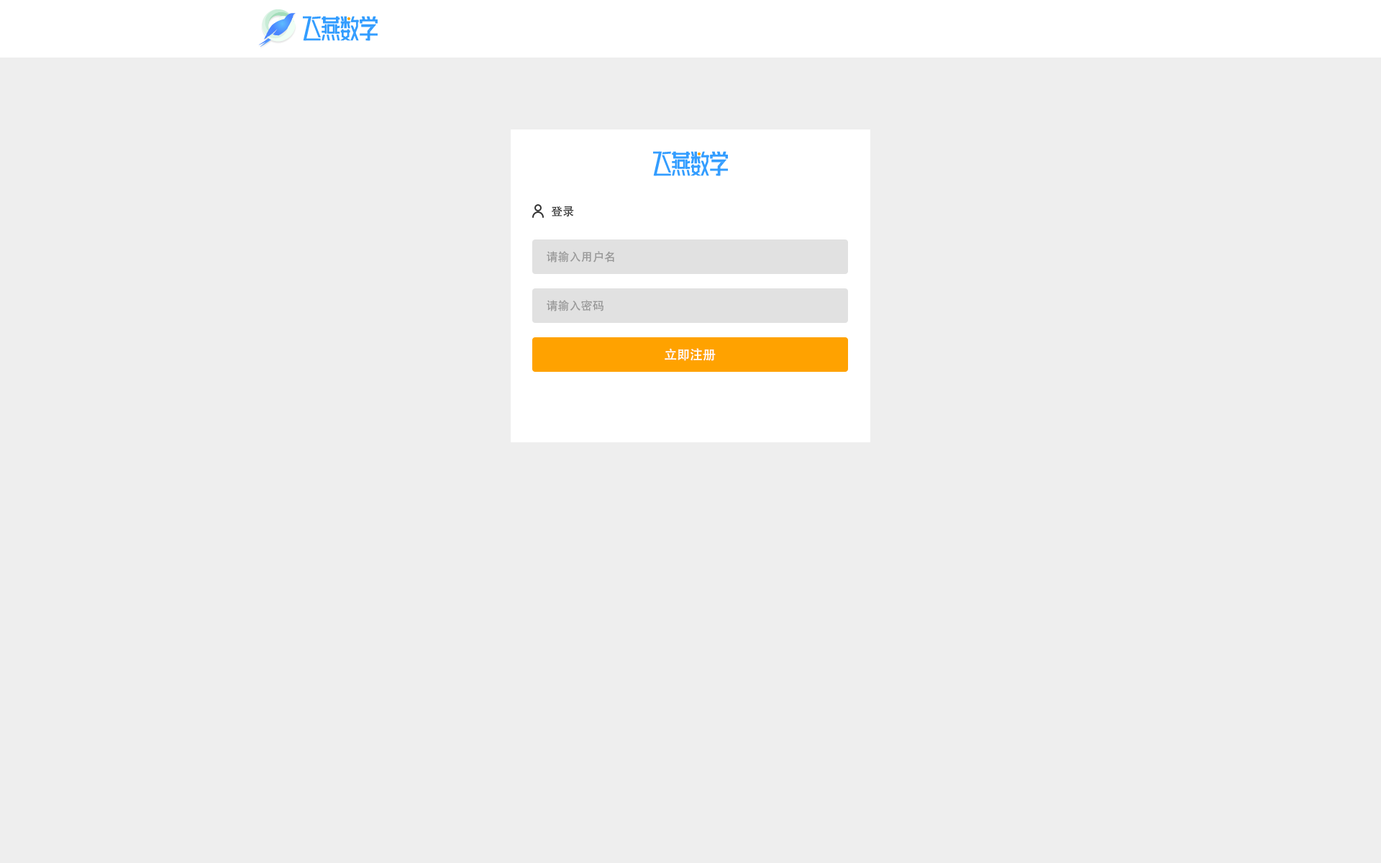
<style>
.page{position:relative;width:1381px;height:863px;background:#eeeeee}
.page>*{position:absolute;margin:0}
.t1{font:11.5px "AdobeHeitiStd-Regular";color:#333333}
.t2{font:11.5px "AdobeHeitiStd-Regular";color:#999999}
.t3{font:12.9px "AdobeHeitiStd-Regular";color:#ffffff}
</style>
<div class="page">
<p class="t1" style="left:551px;top:206px;width:23px;height:11px">登录</p>
<p class="t2" style="left:547px;top:251px;width:67px;height:12px">请输入用户名</p>
<p class="t2" style="left:547px;top:300px;width:57px;height:12px">请输入密码</p>
<p class="t3" style="left:665px;top:348px;width:51px;height:13px">立即注册</p>
</div>
